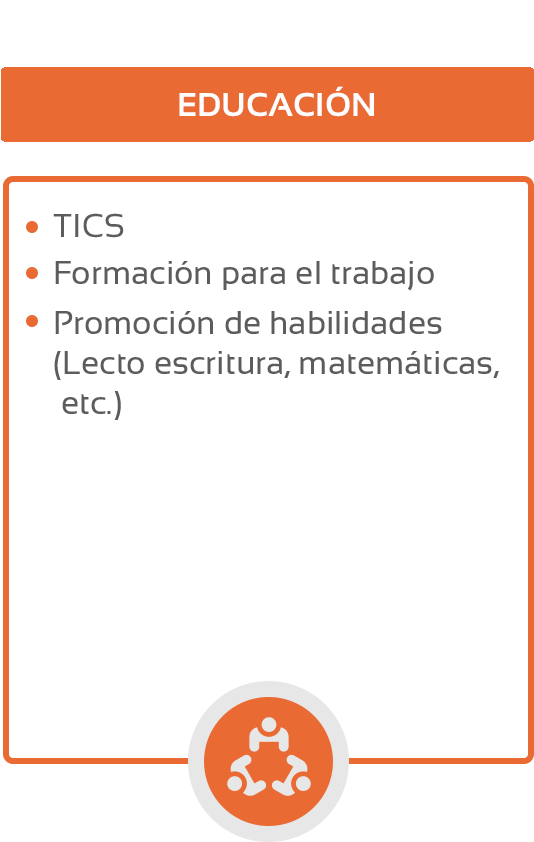
<style>
.page{position:relative;width:534px;height:842px;background:#ffffff}
.page>*{position:absolute;margin:0}
.t1{font:33px "Sansation-Bold";color:#fffefe}
.t2{font:33px "Sansation-Regular";color:#5c5c5c}
</style>
<div class="page">
<p class="t1" style="left:179px;top:86px;width:195px;height:31px">EDUCACIÓN</p>
<p class="t2" style="left:53px;top:213px;width:71px;height:25px">TICS</p>
<p class="t2" style="left:55px;top:261px;width:379px;height:30px">Formación para el trabajo</p>
<p class="t2" style="left:54px;top:311px;width:445px;height:109px">Promoción de habilidades <br>(Lecto escritura, matemáticas,<br> etc.)</p>
</div>
